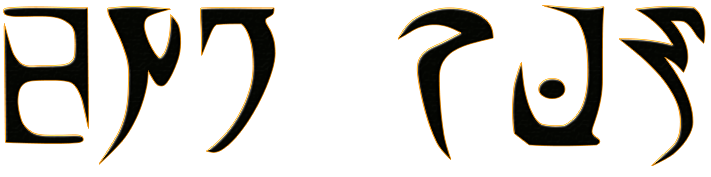
<style>
.page{position:relative;width:711px;height:177px;background:#ffffff}
.page>*{position:absolute;margin:0}
.t1{font:200px "Daedra-Bold";color:#000000}
</style>
<div class="page">
<p class="t1" style="left:3px;top:5px;width:702px;height:161px">ENG RUS</p>
</div>
